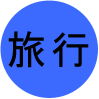
<style>
.page{position:relative;width:99px;height:99px;background:#3c6aff}
.page>*{position:absolute;margin:0}
.t1{font:40px "MS-Gothic";letter-spacing:0.1em;color:#010101}
</style>
<div class="page">
<p class="t1" style="left:8px;top:31px;width:81px;height:37px">旅行</p>
</div>
